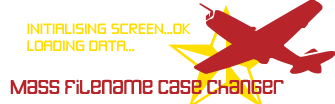
<style>
.page{position:relative;width:335px;height:104px;background:#ffffff}
.page>*{position:absolute;margin:0}
.t1{font:14px "ZeroThrees";color:#ffde00}
.t2{font:24px "Butterbelly";color:#b7242a}
</style>
<div class="page">
<p class="t1" style="left:27px;top:23px;width:164px;height:29px">INITIALISING SCREEN...OK<br>LOADING DATA...</p>
<p class="t2" style="left:10px;top:79px;width:274px;height:15px">Mass Filename Case Changer</p>
</div>
